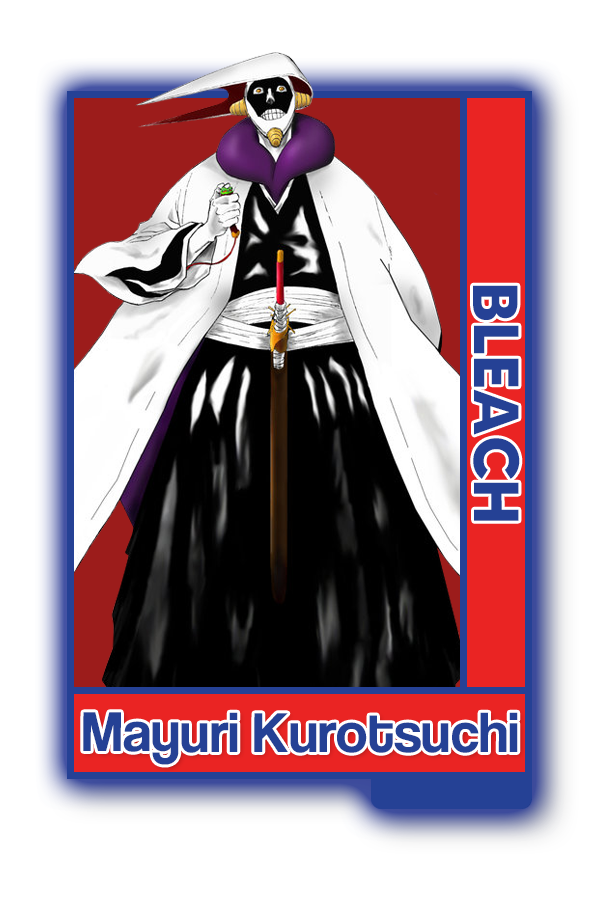
<style>
.page{position:relative;width:600px;height:900px;background:#ffffff}
.page>*{position:absolute;margin:0}
.t1{font:63.6px "MADETOMMY-Bold";color:#254195}
.t2{font:58.2px "CoolveticaRg-Regular";color:#254195}
</style>
<div class="page">
<p class="t1" style="left:473px;top:285px;width:47px;height:236px;rotate:90deg">BLEACH</p>
<p class="t2" style="left:83px;top:712px;width:435px;height:53px">Mayuri Kurotsuchi</p>
</div>
